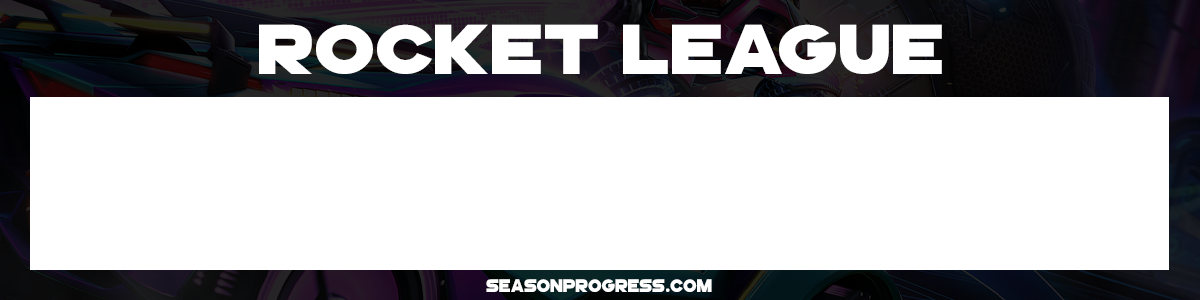
<style>
.page{position:relative;width:1200px;height:300px;background:#ffffff}
.page>*{position:absolute;margin:0}
.t1{font:72px "GoGoPosterPunch";color:#ffffff;scale:1.16 1}
.t2{font:18.5px "GoGoPosterPunch";color:#ffffff}
</style>
<div class="page">
<p class="t1" style="left:259px;top:24px;width:683px;height:50px">ROCKET LEAGUE</p>
<p class="t2" style="left:486px;top:279px;width:226px;height:13px">SEASONPROGRESS.COM</p>
</div>
